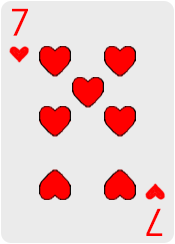
<style>
.page{position:relative;width:175px;height:244px;background:#ebebeb}
.page>*{position:absolute;margin:0}
.t1{font:36px "KozGoPr6N-Regular";color:#ff0000}
</style>
<div class="page">
<p class="t1" style="left:12px;top:8px;width:16px;height:28px">7</p>
<p class="t1" style="left:146px;top:208px;width:17px;height:28px;rotate:-180deg">7</p>
</div>
